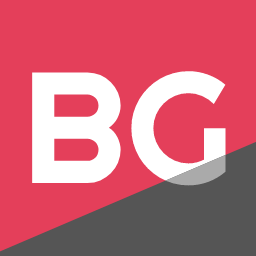
<style>
.page{position:relative;width:256px;height:256px;background:#e43f5a}
.page>*{position:absolute;margin:0}
.t1{font:158px "Righteous-Regular";color:#ffffff}
</style>
<div class="page">
<p class="t1" style="left:32px;top:71px;width:194px;height:115px">BG</p>
<p class="t1" style="left:32px;top:71px;width:194px;height:115px">BG</p>
</div>
